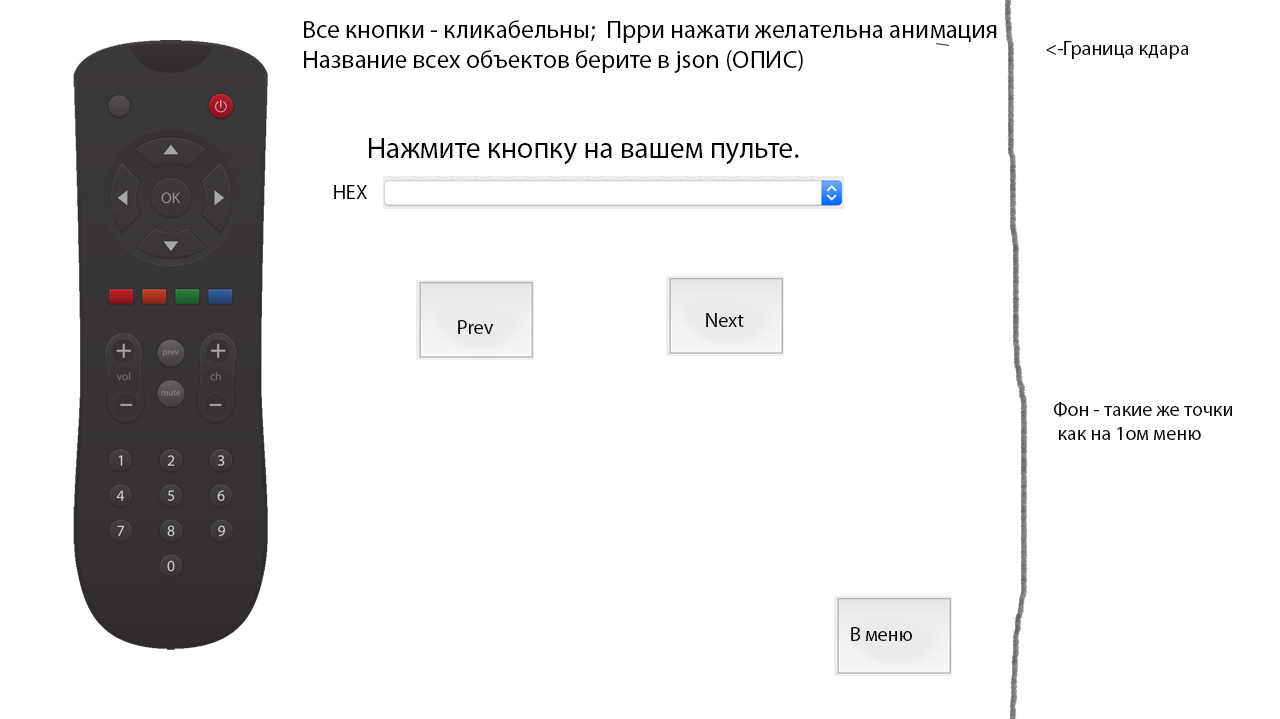
<style>
.page{position:relative;width:1280px;height:719px;background:#ffffff}
.page>*{position:absolute;margin:0}
.t1{font:25.3px "MyriadPro-Regular";color:#000000}
.t2{font:20px "MyriadPro-Regular";color:#000000}
.t3{font:29.3px "MyriadPro-Regular";color:#000000}
</style>
<div class="page">
<p class="t1" style="left:304px;top:20px;width:693px;height:53px">Все кнопки - кликабельны;  Прри нажати желательна анимация <br>Название всех объектов берите в json (ОПИС)</p>
<p class="t2" style="left:1046px;top:41px;width:142px;height:18px">&lt;-Граница кдара</p>
<p class="t3" style="left:369px;top:138px;width:430px;height:27px">Нажмите кнопку на вашем пульте.</p>
<p class="t2" style="left:334px;top:185px;width:33px;height:14px">HEX</p>
<p class="t2" style="left:706px;top:313px;width:38px;height:14px">Next</p>
<p class="t2" style="left:458px;top:320px;width:36px;height:14px">Prev</p>
<p class="t2" style="left:1054px;top:402px;width:178px;height:38px">Фон - такие же точки<br> как на 1ом меню</p>
<p class="t2" style="left:851px;top:627px;width:61px;height:14px">В меню</p>
</div>
